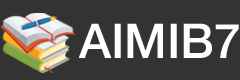
<style>
.page{position:relative;width:240px;height:80px;background:#333333}
.page>*{position:absolute;margin:0}
.t1{font:48px "Helvetica65-Medium";color:#fefeff}
</style>
<div class="page">
<p class="t1" style="left:78px;top:23px;width:161px;height:35px">AIMIB7</p>
</div>
